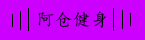
<style>
.page{position:relative;width:145px;height:40px;background:#cc00ff}
.page>*{position:absolute;margin:0}
.t1{font:18px "¿¬Ìå";color:#000000}
</style>
<div class="page">
<p class="t1" style="left:38px;top:11px;width:68px;height:17px">阿仓健身</p>
</div>
